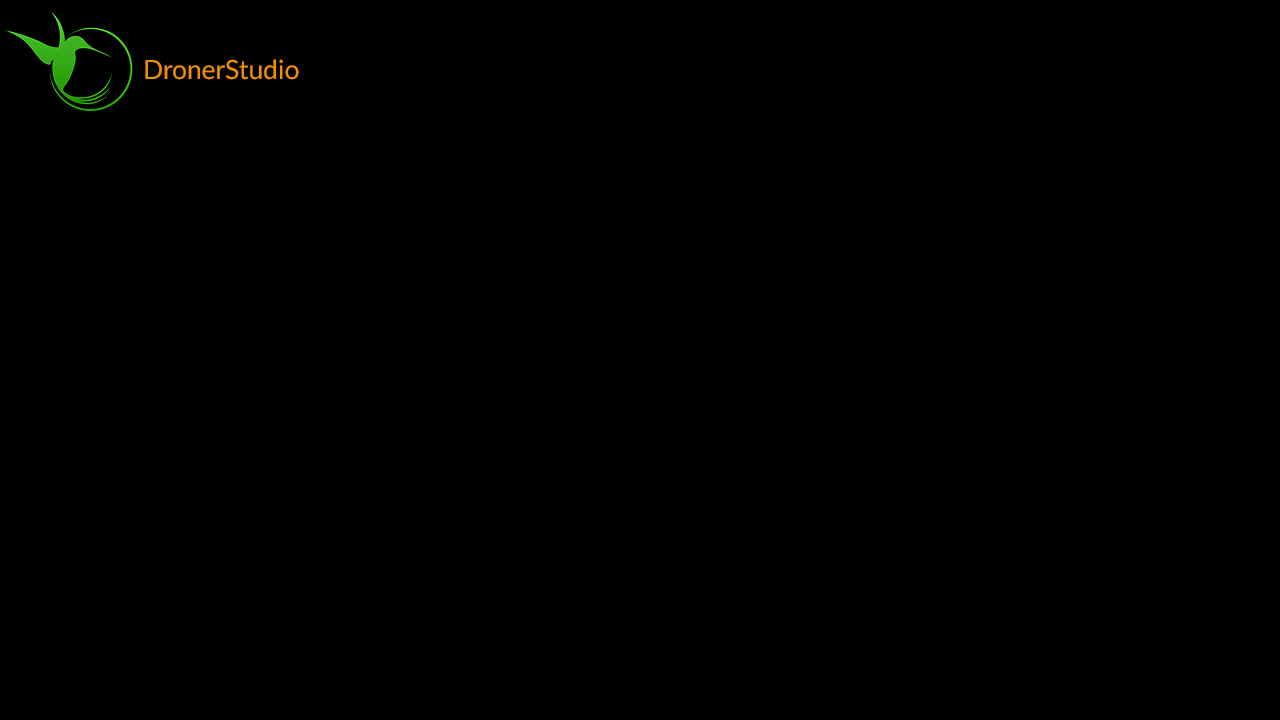
<style>
.page{position:relative;width:1280px;height:720px;background:#000000}
.page>*{position:absolute;margin:0}
.t1{font:26.5px "Lato-Regular";color:#f09000}
</style>
<div class="page">
<p class="t1" style="left:145px;top:59px;width:154px;height:21px">DronerStudio</p>
</div>
